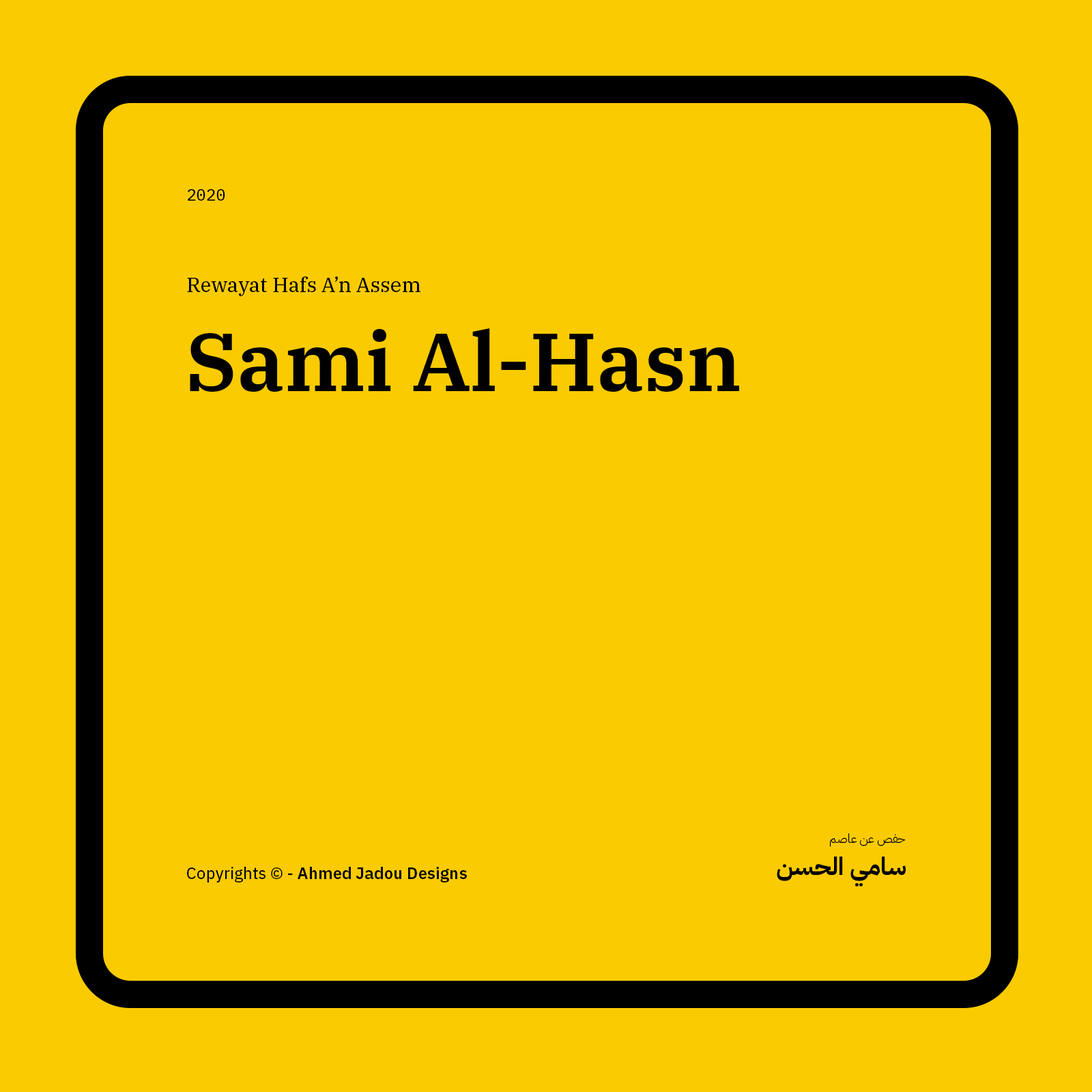
<style>
.page{position:relative;width:1092px;height:1092px;background:#facb00}
.page>*{position:absolute;margin:0}
.t1{font:16.4px "IBMPlexMono-Text";color:#000000}
.t2{font:20.5px "IBMPlexSerif-Text";color:#000000}
.t3{font:81.9px "IBMPlexSerif-SemiBold";color:#000000}
.t4{font:12.3px "IBMPlexArabic-Light";color:#000000}
.t5{font:24.6px "IBMPlexArabic-Bold";color:#000000}
.t6{font:16.4px "IBMPlexSans-SemiBold";color:#000000}
.t7{font:16.4px "IBMPlexSans-Text";color:#000000}
</style>
<div class="page">
<p class="t1" style="left:188px;top:189px;width:37px;height:12px">2020</p>
<p class="t2" style="left:187px;top:276px;width:233px;height:20px">Rewayat Hafs A’n Assem</p>
<p class="t3" style="left:190px;top:328px;width:550px;height:64px">Sami Al-Hasn</p>
<p class="t4" style="left:830px;top:833px;width:76px;height:14px">حفص عن عاصم</p>
<p class="t5" style="left:777px;top:857px;width:129px;height:30px">سامي الحسن</p>
<p class="t6" style="left:187px;top:867px;width:280px;height:15px"><span class="t7">Copyrights © - </span>Ahmed Jadou Designs</p>
</div>
